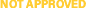
<style>
.page{position:relative;width:86px;height:8px;background:#ffcc33}
.page>*{position:absolute;margin:0}
.t1{font:12px "AcuminConcept-SemiCondensedBold";color:#ffcc33}
</style>
<div class="page">
<p class="t1" style="left:0px;top:0px;width:86px;height:9px">NOT APPROVED</p>
</div>
